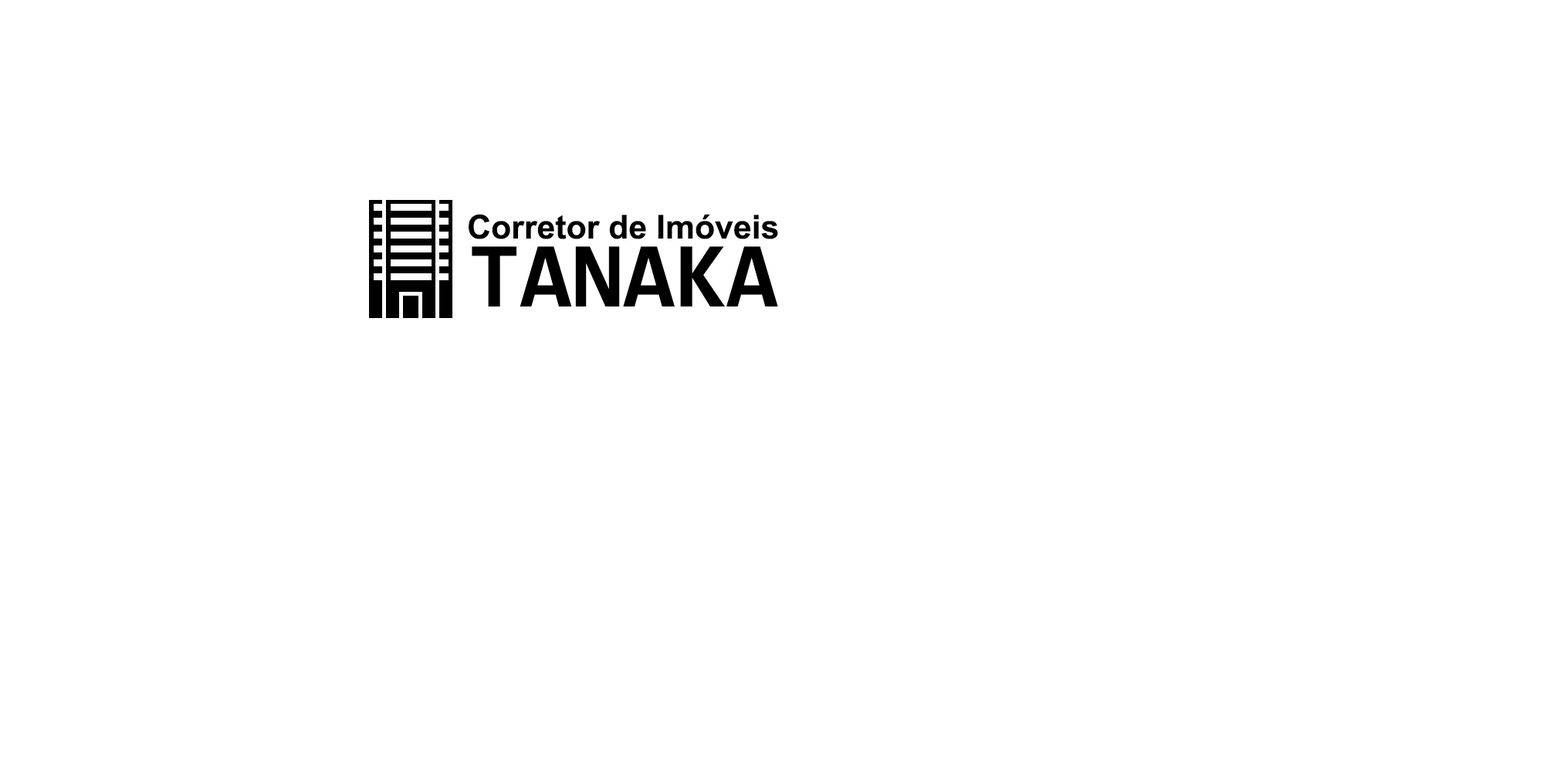
<style>
.page{position:relative;width:1544px;height:772px;background:#ffffff}
.page>*{position:absolute;margin:0}
.t1{font:33px "Arial-BoldMT";color:#000000}
.t2{font:33px "Arial-BoldMT";color:#ffffff}
.t3{font:93.9px "Consolas-Bold";color:#000000}
</style>
<div class="page">
<p class="t1" style="left:469px;top:214px;width:444px;height:32px">Corretor de Imóveis<span class="t2">m Ipsum</span></p>
<p class="t3" style="left:472px;top:246px;width:306px;height:61px">TANAKA</p>
</div>
